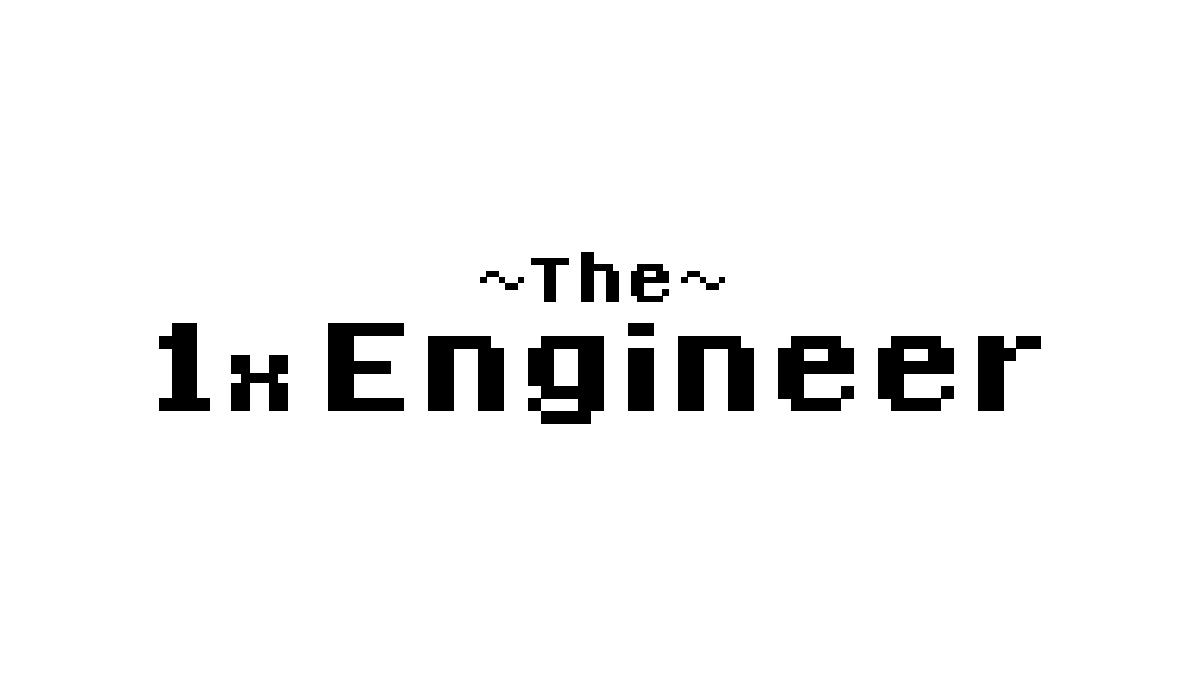
<style>
.page{position:relative;width:1200px;height:675px;background:#ffffff}
.page>*{position:absolute;margin:0}
.t1{font:100px "8-Bit-Madness";color:#000000}
.t2{font:200px "8-Bit-Madness";color:#000000}
.t3{font:150px "8-Bit-Madness";color:#000000}
</style>
<div class="page">
<p class="t1" style="left:531px;top:252px;width:138px;height:50px">The</p>
<p class="t1" style="left:480px;top:271px;width:44px;height:19px">~</p>
<p class="t1" style="left:681px;top:271px;width:44px;height:19px">~</p>
<p class="t2" style="left:159px;top:323px;width:882px;height:101px">1<span class="t3">x </span>Engineer</p>
</div>
